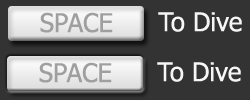
<style>
.page{position:relative;width:250px;height:100px;background:#333333}
.page>*{position:absolute;margin:0}
.t1{font:25.9px "Tahoma";color:#9f9f9f}
.t2{font:25.9px "Tahoma";color:#f6f6f6}
</style>
<div class="page">
<p class="t1" style="left:39px;top:62px;width:73px;height:21px">SPACE</p>
<p class="t2" style="left:157px;top:62px;width:84px;height:20px">To Dive</p>
</div>
